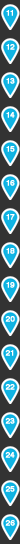
<style>
.page{position:relative;width:20px;height:544px;background:#333333}
.page>*{position:absolute;margin:0}
.t1{font:8px/34px "Helvetica-Bold";letter-spacing:-0.035em;color:#ffffff;text-transform:uppercase;font-weight:bold}
</style>
<div class="page">
<p class="t1" style="left:5px;top:10px;width:10px;height:516px;text-align:center">11<br>12<br>13<br>14<br>15<br>16<br>17<br>18<br>19<br>20<br>21<br>22<br>23<br>24<br>25<br>26</p>
</div>
